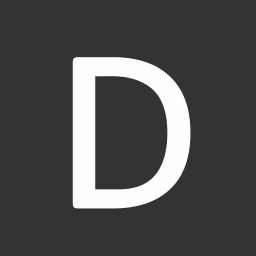
<style>
.page{position:relative;width:256px;height:256px;background:#333333}
.page>*{position:absolute;margin:0}
.t1{font:200px "KoPubDotumBold";color:#fefefe}
</style>
<div class="page">
<p class="t1" style="left:72px;top:57px;width:119px;height:152px">D</p>
</div>
